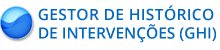
<style>
.page{position:relative;width:220px;height:50px;background:#ffffff}
.page>*{position:absolute;margin:0}
.t1{font:15.5px "OpenSans-Semibold";color:#0066be;text-transform:uppercase}
.t2{font:15.5px "OpenSans-Semibold";letter-spacing:0.025em;color:#0066be;text-transform:uppercase}
</style>
<div class="page">
<p class="t1" style="left:38px;top:5px;width:178px;height:38px"><span class="t2">Gestor de Histórico <br></span>de intervenções (GHI)</p>
</div>
